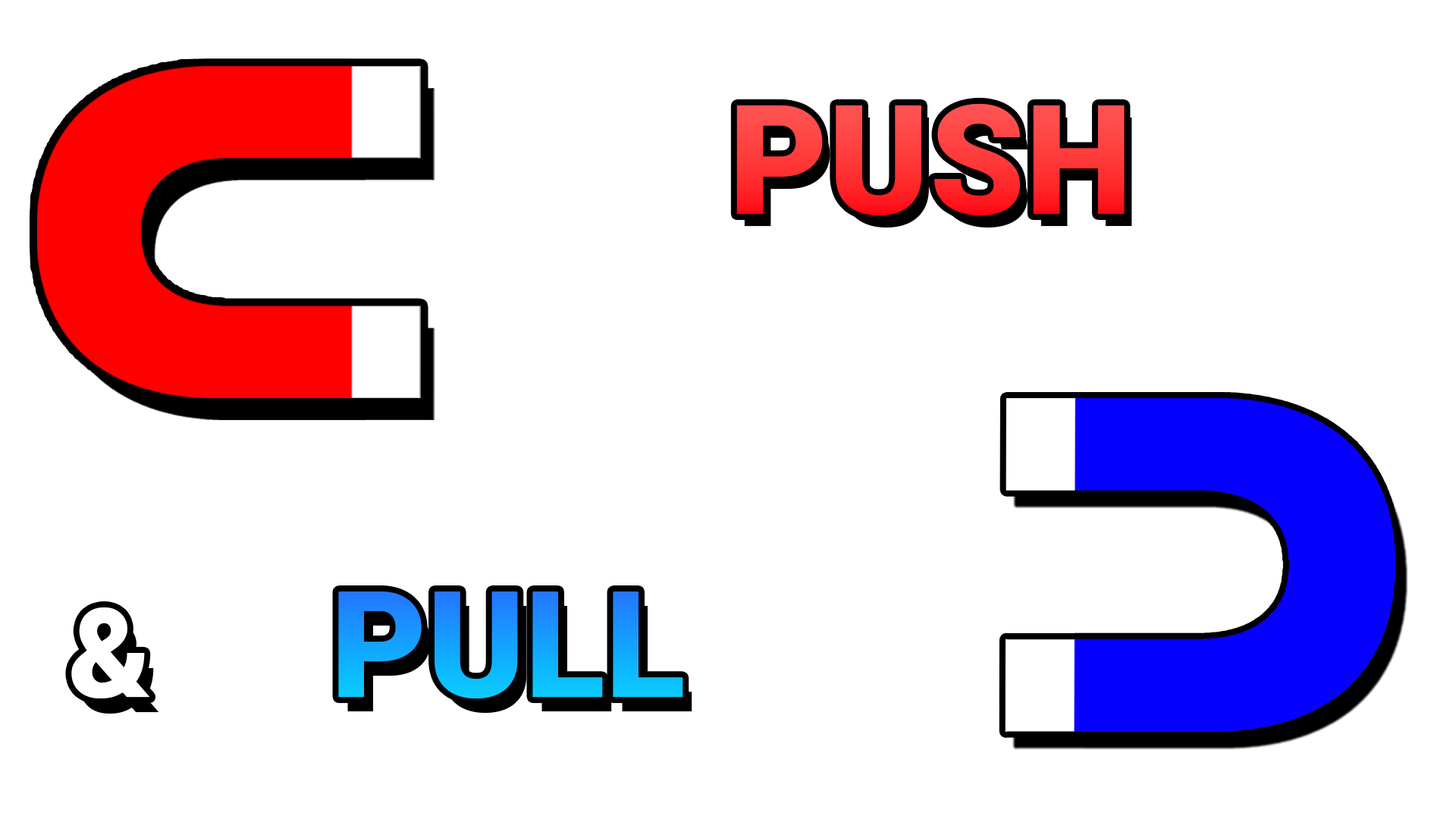
<style>
.page{position:relative;width:1456px;height:819px;background:#ffffff}
.page>*{position:absolute;margin:0}
.t1{font:152.6px "Roboto-Black"}
.t2{font:147.9px "Roboto-Black"}
.t3{font:123.9px "Roboto-Black";color:#ffffff}
</style>
<div class="page">
<p class="t1" style="left:736px;top:104px;width:389px;height:111px">PUSH</p>
<p class="t2" style="left:338px;top:591px;width:345px;height:107px">PULL</p>
<p class="t3" style="left:71px;top:607px;width:79px;height:91px">&amp;</p>
</div>
